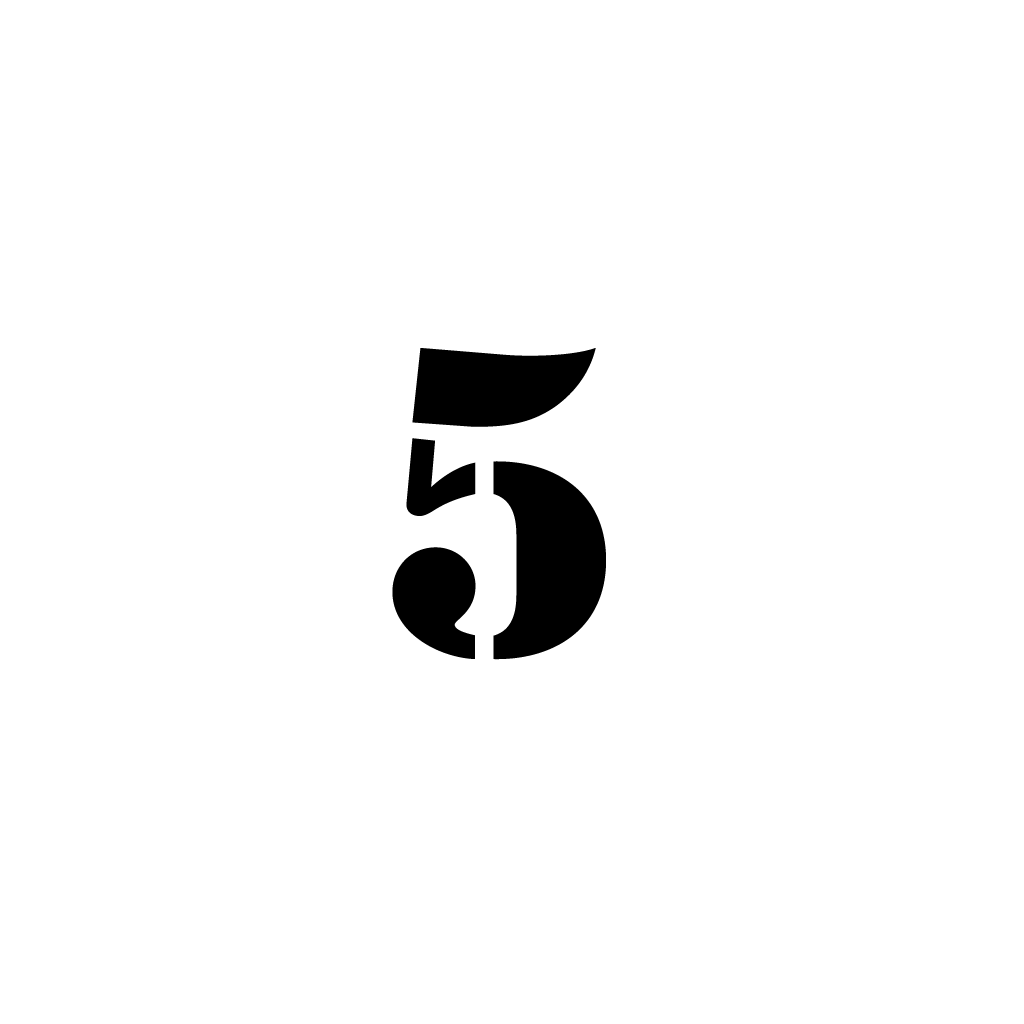
<style>
.page{position:relative;width:1024px;height:1024px;background:#ffffff}
.page>*{position:absolute;margin:0}
.t1{font:400px "StencilStd";color:#000000}
</style>
<div class="page">
<p class="t1" style="left:392px;top:348px;width:214px;height:312px">5</p>
</div>
